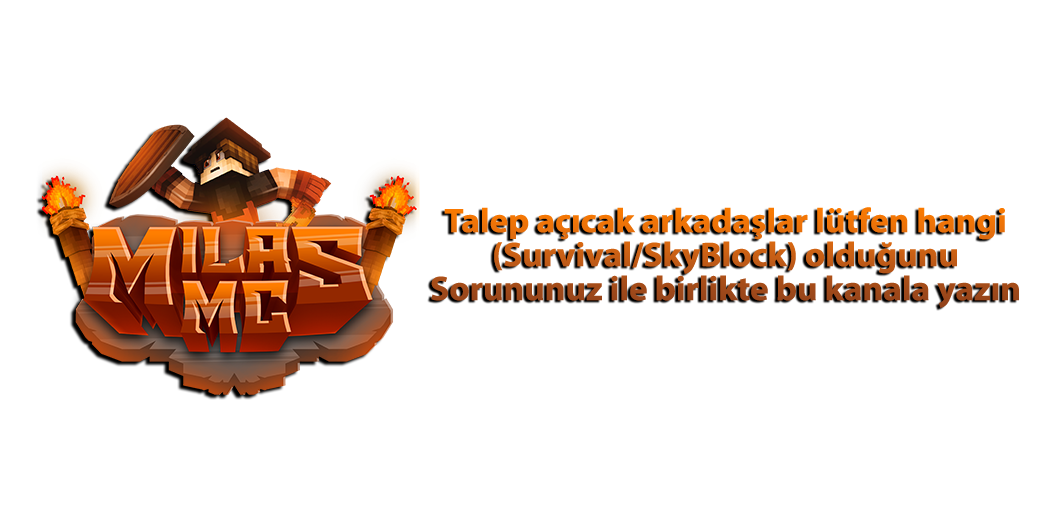
<style>
.page{position:relative;width:1040px;height:512px;background:#ffffff}
.page>*{position:absolute;margin:0}
.t1{font:34.2px/34px "MyriadPro-Bold";scale:1.03 1}
</style>
<div class="page">
<p class="t1" style="left:431px;top:207px;width:588px;height:101px;text-align:center">Talep açıcak arkadaşlar lütfen hangi<br>(Survival/SkyBlock) olduğunu<br>Sorununuz ile birlikte bu kanala yazın</p>
</div>
